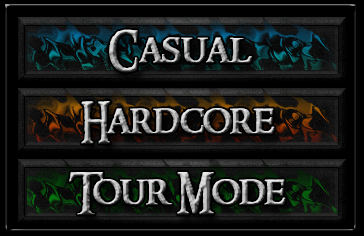
<style>
.page{position:relative;width:364px;height:236px;background:#000000}
.page>*{position:absolute;margin:0}
.t1{font:40px "RingbearerMedium";letter-spacing:-0.01em;font-weight:bold}
</style>
<div class="page">
<p class="t1" style="left:109px;top:29px;width:143px;height:44px">Casual</p>
<p class="t1" style="left:81px;top:101px;width:194px;height:43px">Hardcore</p>
<p class="t1" style="left:69px;top:172px;width:217px;height:43px">Tour Mode</p>
</div>
